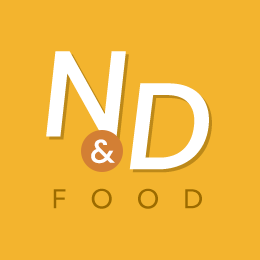
<style>
.page{position:relative;width:260px;height:260px;background:#f3b42e}
.page>*{position:absolute;margin:0}
.t1{font:122.7px "Poppins-Medium";color:#ffffff}
.t2{font:124.3px "Poppins-Medium";color:#ffffff}
.t3{font:32.8px "Poppins-Medium";color:#ffffff}
.t4{font:26.8px "AvenirNext-Medium";letter-spacing:0.88em;color:#9c6b00}
</style>
<div class="page">
<p class="t1" style="left:46px;top:51px;width:80px;height:86px">​N</p>
<p class="t2" style="left:129px;top:83px;width:80px;height:87px">D</p>
<p class="t3" style="left:91px;top:139px;width:24px;height:25px">&amp;</p>
<p class="t4" style="left:53px;top:188px;width:149px;height:21px">FOOD</p>
</div>
